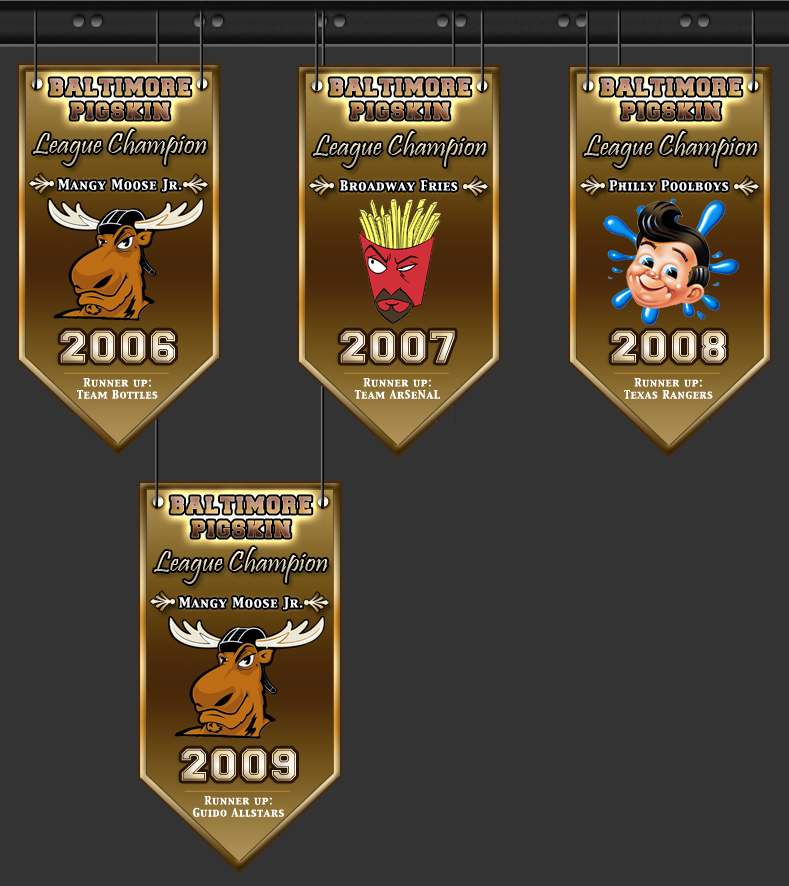
<style>
.page{position:relative;width:789px;height:886px;background:#333333}
.page>*{position:absolute;margin:0}
.t1{font:12px "CapitalsRegular";letter-spacing:0.075em;color:#ffffff}
.t2{font:45px "Varsity-Regular";letter-spacing:0.075em}
.t3{font:10px/12px "CapitalsRegular";letter-spacing:0.075em;color:#ffffff}
</style>
<div class="page">
<p class="t1" style="left:58px;top:179px;width:124px;height:13px">Mangy Moose Jr.</p>
<p class="t1" style="left:340px;top:180px;width:118px;height:11px">Broadway Fries</p>
<p class="t1" style="left:609px;top:180px;width:120px;height:11px">Philly Poolboys</p>
<p class="t2" style="left:60px;top:330px;width:115px;height:33px">2006</p>
<p class="t2" style="left:340px;top:330px;width:115px;height:33px">2007</p>
<p class="t2" style="left:611px;top:330px;width:115px;height:33px">2008</p>
<p class="t3" style="left:77px;top:378px;width:81px;height:21px;text-align:center">Runner up:<br>Team Bottles</p>
<p class="t3" style="left:354px;top:378px;width:86px;height:21px;text-align:center">Runner up:<br>Team ArSeNaL</p>
<p class="t3" style="left:624px;top:378px;width:89px;height:21px;text-align:center">Runner up:<br>Texas Rangers</p>
<p class="t1" style="left:179px;top:597px;width:124px;height:13px">Mangy Moose Jr.</p>
<p class="t2" style="left:181px;top:748px;width:115px;height:33px">2009</p>
<p class="t3" style="left:193px;top:796px;width:91px;height:21px;text-align:center">Runner up:<br>Guido Allstars</p>
</div>
